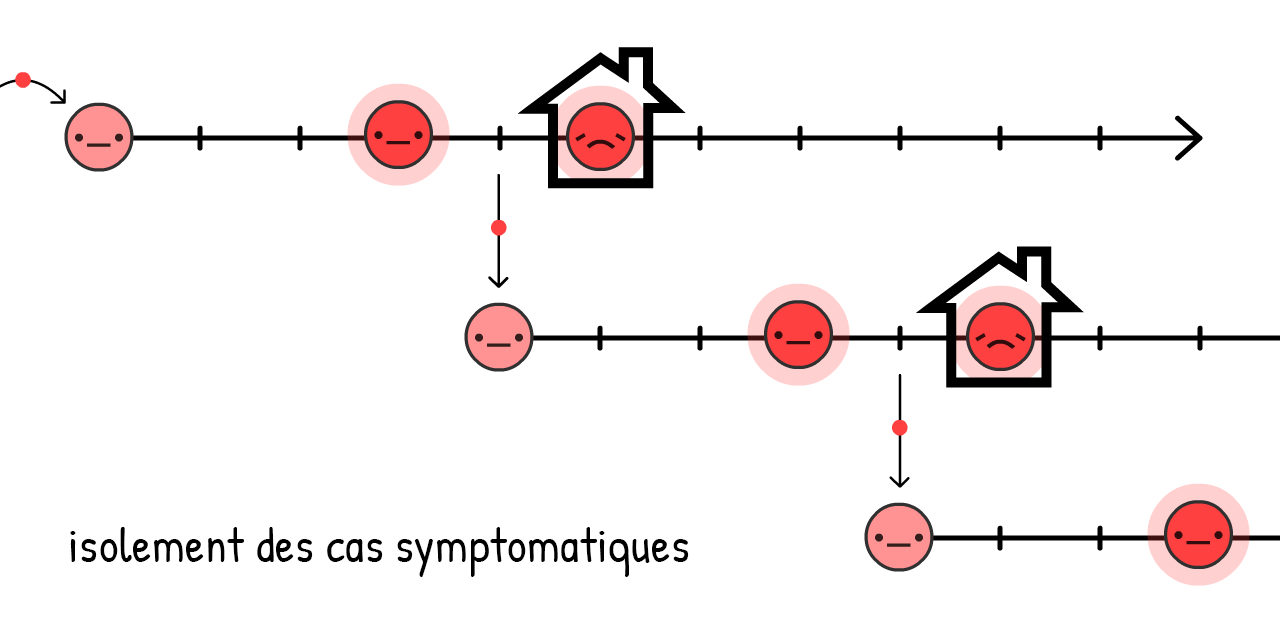
<style>
.page{position:relative;width:1280px;height:640px;background:#ffffff}
.page>*{position:absolute;margin:0}
.t1{font:82px "PatrickHand-Regular";letter-spacing:0.015em;color:#000000}
</style>
<div class="page">
<p class="t1" style="left:70px;top:527px;width:619px;height:50px">isolement des cas symptomatiques</p>
</div>
